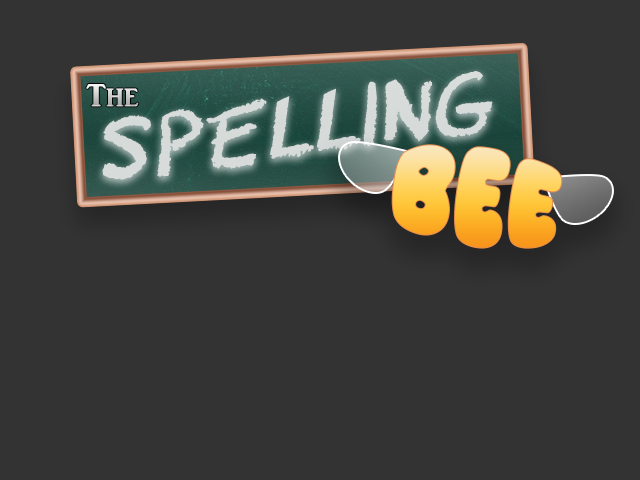
<style>
.page{position:relative;width:640px;height:480px;background:#333333}
.page>*{position:absolute;margin:0}
.t1{font:61.5px "CFSchoolZoneRegular";color:#d6dbda;text-transform:uppercase}
.t2{font:32.8px "ARJULIAN"}
.t3{font:92.8px "Pleasantly-Plump";scale:0.75 1}
</style>
<div class="page">
<p class="t1" style="left:102px;top:71px;width:391px;height:109px;rotate:-2deg">Spelling</p>
<p class="t2" style="left:86px;top:84px;width:53px;height:23px">The</p>
<p class="t3" style="left:391px;top:144px;width:172px;height:105px;rotate:8deg">Bee</p>
</div>
